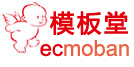
<style>
.page{position:relative;width:134px;height:67px;background:#ffffff}
.page>*{position:absolute;margin:0}
.t1{font:23.9px "MicrosoftYaHei";letter-spacing:0.1em;color:#e3000b;font-weight:bold}
.t2{font:22px "ArialMT";color:#e96140}
.t3{font:22px "ArialMT";color:#e3000b}
</style>
<div class="page">
<p class="t1" style="left:50px;top:11px;width:78px;height:25px">模板堂</p>
<p class="t2" style="left:40px;top:40px;width:89px;height:17px"><span class="t3">ec</span>moban</p>
</div>
